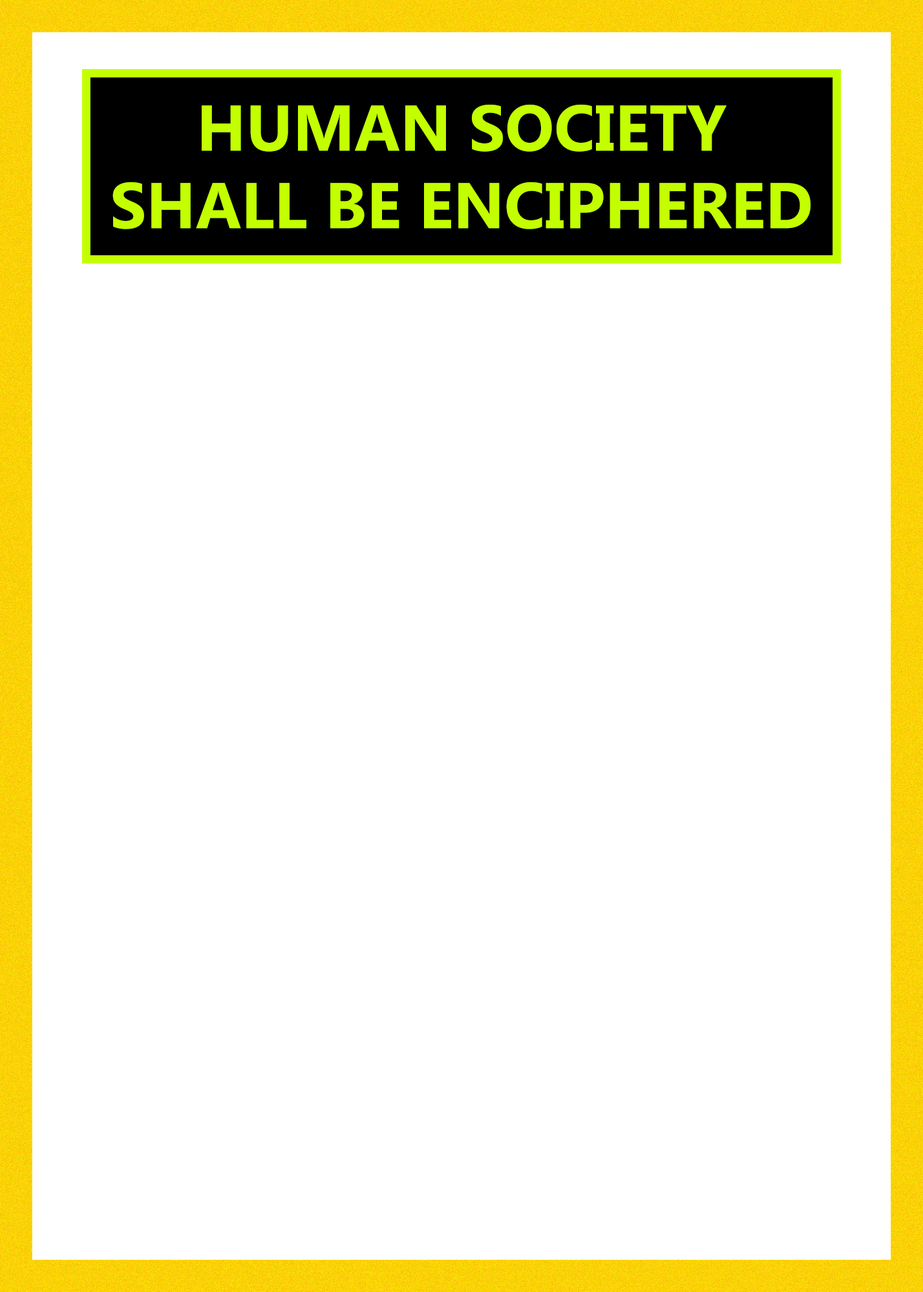
<style>
.page{position:relative;width:923px;height:1292px;background:#ffffff}
.page>*{position:absolute;margin:0}
.t1{font:64.6px "Ebrima-Bold";color:#c3ff00}
</style>
<div class="page">
<p class="t1" style="left:112px;top:105px;width:698px;height:124px;text-align:center">HUMAN SOCIETY <br>SHALL BE ENCIPHERED</p>
</div>
